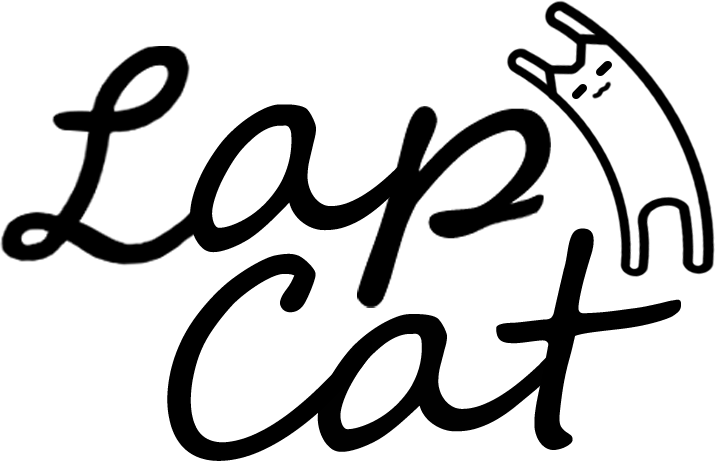
<style>
.page{position:relative;width:715px;height:465px;background:#ffffff}
.page>*{position:absolute;margin:0}
.t1{font:300.4px "SegoeScript";color:#000000}
.t2{font:280.4px "SegoeScript";letter-spacing:-0.04em;color:#000000;scale:1.1 1}
.t3{font:249.5px "SegoeScript";color:#000000;scale:1.1 1}
.t4{font:280.4px "SegoeScript";letter-spacing:-0.04em;color:#010101;scale:1.1 1}
</style>
<div class="page">
<p class="t1" style="left:190px;top:104px;width:233px;height:149px">a</p>
<p class="t2" style="left:496px;top:228px;width:185px;height:222px;rotate:-2deg">t</p>
<p class="t3" style="left:167px;top:253px;width:206px;height:208px;rotate:-10deg">C</p>
<p class="t4" style="left:317px;top:314px;width:239px;height:138px">a</p>
</div>
